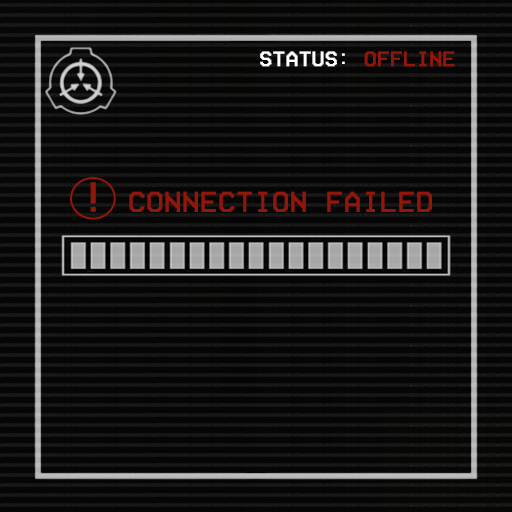
<style>
.page{position:relative;width:512px;height:512px;background:#060606}
.page>*{position:absolute;margin:0}
.t1{font:21.3px "VCROSDMono";color:#ffffff;font-weight:bold}
.t2{font:21.3px "VCROSDMono";color:#94160b;font-weight:bold}
.t3{font:42.1px "VCROSDMono";color:#93160b;font-weight:bold;scale:1.06 1}
.t4{font:29.3px "VCROSDMono";color:#93160b;font-weight:bold}
</style>
<div class="page">
<p class="t1" style="left:260px;top:51px;width:195px;height:16px">STATUS: <span class="t2">OFFLINE</span></p>
<p class="t3" style="left:90px;top:182px;width:6px;height:30px">!</p>
<p class="t4" style="left:129px;top:191px;width:303px;height:21px">CONNECTION FAILED</p>
</div>
